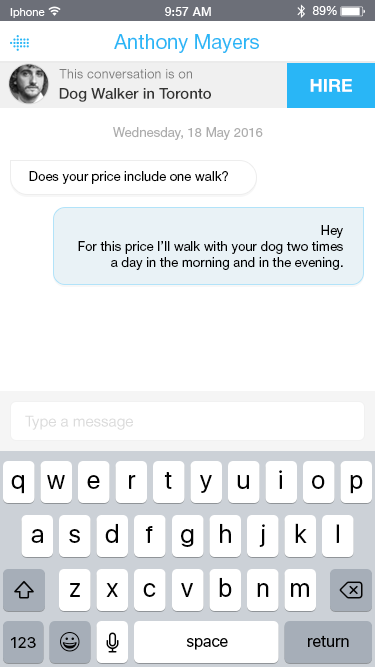
<style>
.page{position:relative;width:375px;height:667px;background:#ffffff}
.page>*{position:absolute;margin:0}
.t1{font:20px "HelveticaNeueCyr-Roman";color:#29b6f6}
.t2{font:13px "HelveticaNeueCyr-Roman";color:#7d7d7d}
.t3{font:15px "HelveticaNeueCyr-Medium";color:#343433}
.t4{font:18px "HelveticaNeueCyr-Bold";color:#ffffff}
.t5{font:13px "HelveticaNeueCyr-Roman";color:#adadad}
.t6{font:13px "HelveticaNeueCyr-Roman";color:#000000}
.t7{font:15px "HelveticaNeueCyr-Roman";color:#dbdbdb}
</style>
<div class="page">
<p class="t1" style="left:114px;top:34px;width:145px;height:19px">Anthony Mayers</p>
<p class="t2" style="left:59px;top:69px;width:133px;height:10px">This conversation is on</p>
<p class="t3" style="left:59px;top:88px;width:152px;height:14px">Dog Walker in Toronto</p>
<p class="t4" style="left:310px;top:79px;width:42px;height:13px">HIRE</p>
<p class="t5" style="left:113px;top:127px;width:150px;height:13px">Wednesday, 18 May 2016</p>
<p class="t6" style="left:29px;top:171px;width:199px;height:13px">Does your price include one walk?</p>
<p class="t6" style="left:78px;top:225px;width:265px;height:45px;text-align:right">Hey<br>For this price I’ll walk with your dog two times<br>a day in the morning and in the evening.</p>
<p class="t7" style="left:25px;top:415px;width:108px;height:15px">Type a message</p>
</div>
